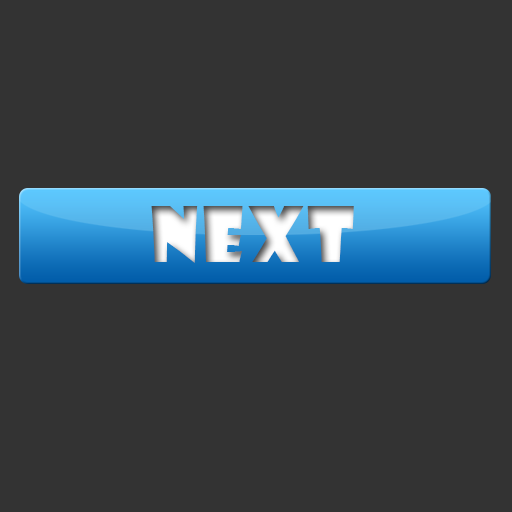
<style>
.page{position:relative;width:512px;height:512px;background:#333333}
.page>*{position:absolute;margin:0}
.t1{font:75.1px "ShowcardGothic-Reg";letter-spacing:0.05em}
</style>
<div class="page">
<p class="t1" style="left:151px;top:206px;width:203px;height:57px">NEXT</p>
</div>
